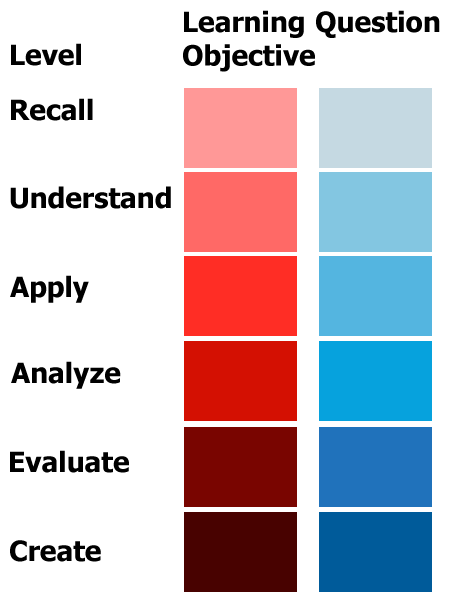
<style>
.page{position:relative;width:450px;height:600px;background:#ffffff}
.page>*{position:absolute;margin:0}
.t1{font:28px "Tahoma-Bold";color:#000000}
</style>
<div class="page">
<p class="t1" style="left:183px;top:10px;width:132px;height:62px;text-align:right">Learning<br>Objective</p>
<p class="t1" style="left:316px;top:10px;width:124px;height:28px">Question</p>
<p class="t1" style="left:11px;top:43px;width:70px;height:23px">Level</p>
<p class="t1" style="left:11px;top:98px;width:82px;height:23px">Recall</p>
<p class="t1" style="left:10px;top:186px;width:161px;height:23px">Understand</p>
<p class="t1" style="left:10px;top:275px;width:79px;height:28px">Apply</p>
<p class="t1" style="left:11px;top:361px;width:110px;height:28px">Analyze</p>
<p class="t1" style="left:10px;top:450px;width:119px;height:23px">Evaluate</p>
<p class="t1" style="left:10px;top:540px;width:91px;height:22px">Create</p>
</div>
